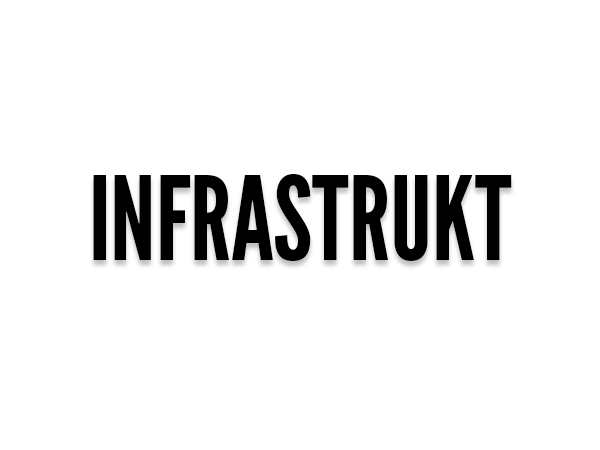
<style>
.page{position:relative;width:600px;height:450px;background:#ffffff}
.page>*{position:absolute;margin:0}
.t1{font:115px "LeagueGothic";color:#000000}
</style>
<div class="page">
<p class="t1" style="left:93px;top:173px;width:419px;height:89px">INFRASTRUKT</p>
</div>
